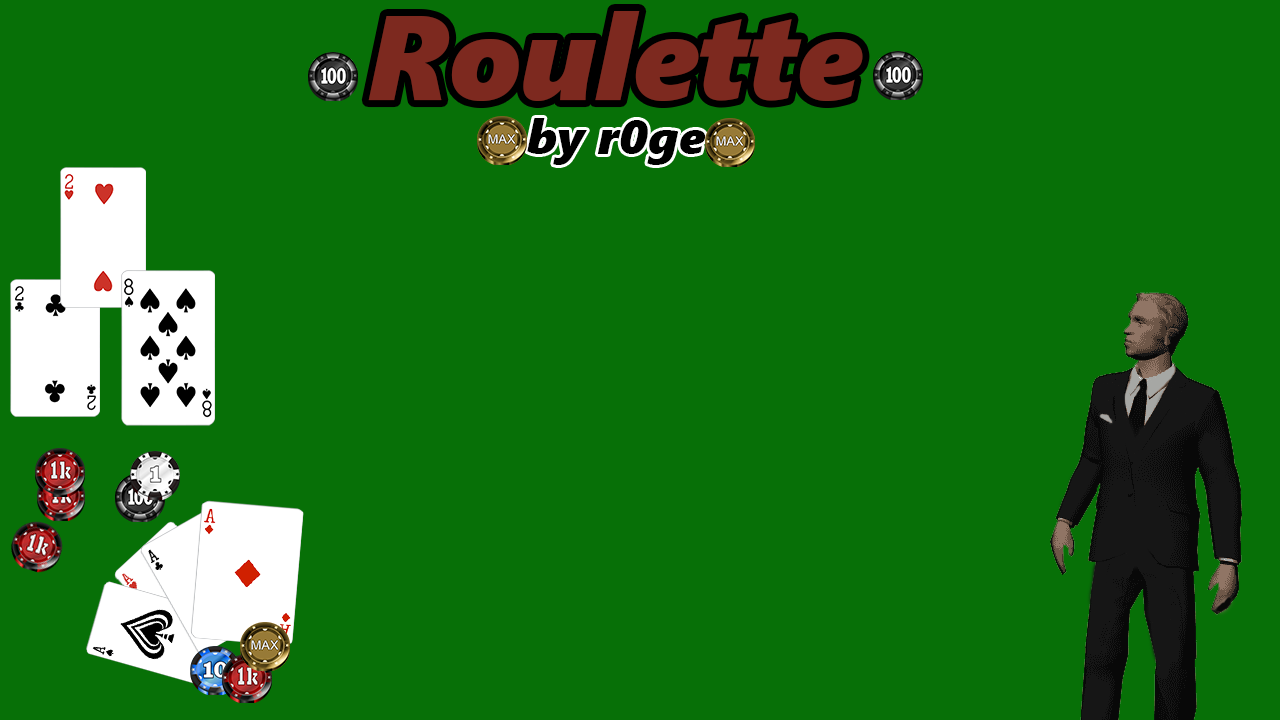
<style>
.page{position:relative;width:1280px;height:720px;background:#077007}
.page>*{position:absolute;margin:0}
.t1{font:120px "SegoeUIBlack-Italic";color:#7d291f}
.t2{font:48px "SegoeUIBlack-Italic";color:#000000}
</style>
<div class="page">
<p class="t1" style="left:368px;top:11px;width:495px;height:90px">Roulette</p>
<p class="t2" style="left:527px;top:118px;width:179px;height:47px">by r0ge</p>
</div>
